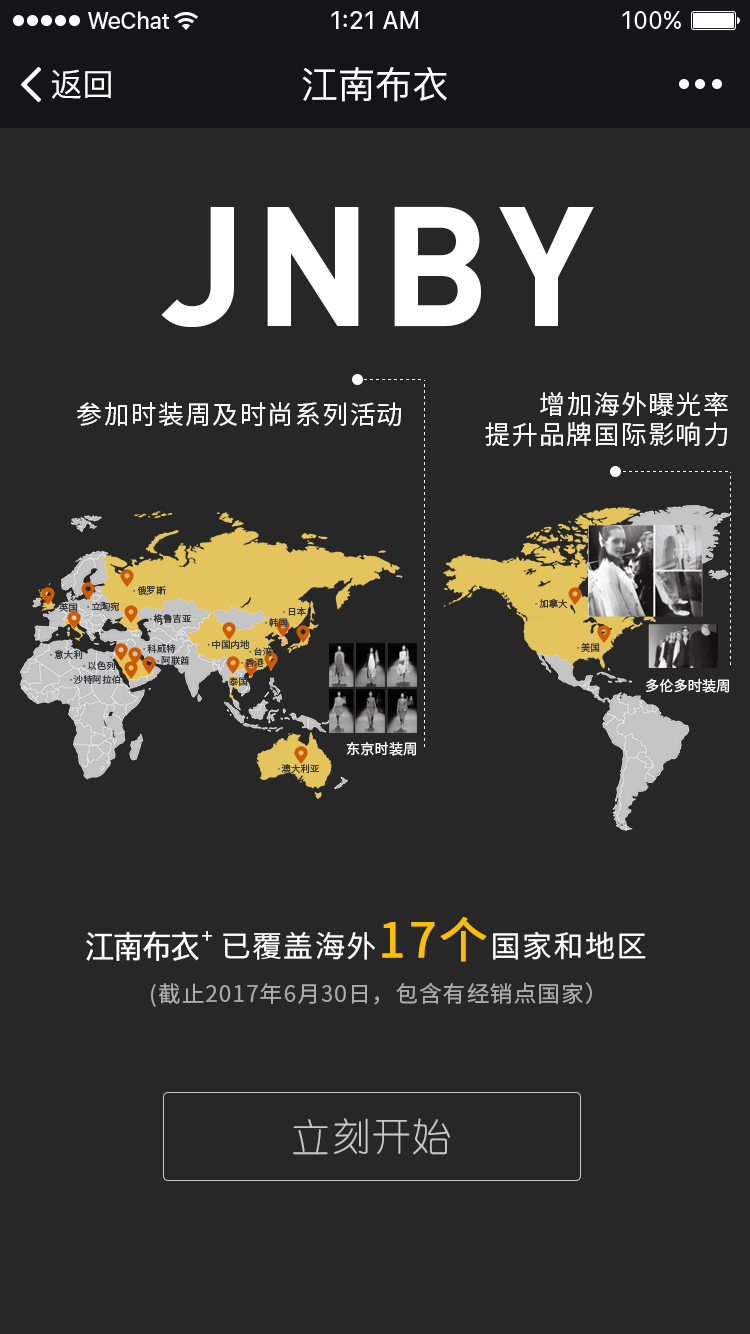
<style>
.page{position:relative;width:750px;height:1334px;background:#272727}
.page>*{position:absolute;margin:0}
.t1{font:32px "PingFang-SC-Medium";color:#ffffff}
.t2{font:37px "PingFang-SC-Medium";color:#ffffff}
.t3{font:166.7px "DINPro-Bold";letter-spacing:0.05em;color:#ffffff;text-transform:uppercase}
.t4{font:25.9px/30px "SourceHanSansCN-Regular";letter-spacing:0.05em;color:#ffffff;text-transform:uppercase}
.t5{font:25.9px "SourceHanSansCN-Regular";letter-spacing:0.05em;color:#ffffff;text-transform:uppercase}
.t6{font:9.3px "SourceHanSansCN-Regular";color:#3c3c40;text-transform:uppercase}
.t7{font:14px "SourceHanSansCN-Regular";color:#ffffff;text-transform:uppercase}
.t8{font:29.9px "SourceHanSansCN-Regular";letter-spacing:0.05em;color:#ffffff;text-transform:uppercase}
.t9{font:47.9px "SourceHanSansCN-Regular";letter-spacing:0.05em;color:#fbbe04;text-transform:uppercase;font-weight:bold}
.t10{font:22.4px "SourceHanSansCN-Regular";letter-spacing:0.05em;color:#ababab;text-transform:uppercase}
.t11{font:38.7px "YouYuan";letter-spacing:0.05em;color:#c8c8c8;text-transform:uppercase}
</style>
<div class="page">
<p class="t1" style="left:52px;top:69px;width:59px;height:30px">返回</p>
<p class="t2" style="left:302px;top:67px;width:145px;height:35px">江南布衣</p>
<p class="t3" style="left:161px;top:206px;width:433px;height:122px">JNBY</p>
<p class="t4" style="left:485px;top:392px;width:243px;height:55px;text-align:right">增加海外曝光率<br>提升品牌国际影响力</p>
<p class="t5" style="left:77px;top:402px;width:324px;height:25px">参加时装周及时尚系列活动</p>
<p class="t6" style="left:133px;top:586px;width:33px;height:9px">·俄罗斯</p>
<p class="t6" style="left:55px;top:603px;width:23px;height:9px">·英国</p>
<p class="t6" style="left:87px;top:601px;width:33px;height:10px">·立陶宛</p>
<p class="t6" style="left:535px;top:598px;width:33px;height:10px">·加拿大</p>
<p class="t6" style="left:150px;top:614px;width:41px;height:9px">·格鲁吉亚</p>
<p class="t6" style="left:283px;top:607px;width:23px;height:9px">·日本</p>
<p class="t6" style="left:265px;top:618px;width:23px;height:9px">·韩国</p>
<p class="t6" style="left:208px;top:639px;width:42px;height:10px">·中国内地</p>
<p class="t6" style="left:50px;top:650px;width:33px;height:9px">·意大利</p>
<p class="t6" style="left:143px;top:643px;width:33px;height:11px">·科威特</p>
<p class="t6" style="left:249px;top:647px;width:23px;height:9px">·台湾</p>
<p class="t6" style="left:577px;top:643px;width:23px;height:9px">·美国</p>
<p class="t6" style="left:83px;top:661px;width:33px;height:9px">·以色列</p>
<p class="t6" style="left:157px;top:656px;width:33px;height:9px">·阿联酋</p>
<p class="t6" style="left:241px;top:658px;width:23px;height:9px">·香港</p>
<p class="t6" style="left:70px;top:675px;width:51px;height:9px">·沙特阿拉伯</p>
<p class="t6" style="left:225px;top:677px;width:23px;height:9px">·泰国</p>
<p class="t7" style="left:646px;top:678px;width:83px;height:15px">多伦多时装周</p>
<p class="t7" style="left:346px;top:741px;width:70px;height:15px">东京时装周</p>
<p class="t6" style="left:278px;top:764px;width:41px;height:9px">·澳大利亚</p>
<p class="t8" style="left:223px;top:917px;width:423px;height:45px">已覆盖海外<span class="t9">17个</span>国家和地区</p>
<p class="t10" style="left:151px;top:982px;width:441px;height:25px">(截止2017年6月30日，包含有经销点国家）</p>
<p class="t11" style="left:293px;top:1118px;width:157px;height:37px">立刻开始</p>
</div>
